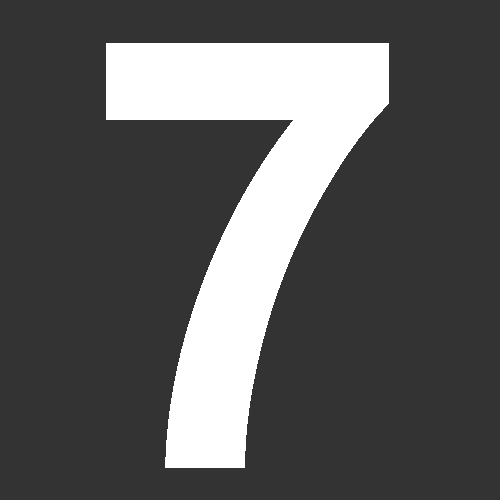
<style>
.page{position:relative;width:500px;height:500px;background:#333333}
.page>*{position:absolute;margin:0}
.t1{font:600px "Arial-BoldMT";color:#ffffff}
</style>
<div class="page">
<p class="t1" style="left:106px;top:43px;width:283px;height:425px">7</p>
</div>
